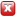
<style>
.page{position:relative;width:16px;height:16px}
.page>*{position:absolute;margin:0}
.t1{font:18px "Arial-Black";letter-spacing:0.05em;color:#ffffff;font-weight:bold}
</style>
<div class="page">
<p class="t1" style="left:3px;top:4px;width:9px;height:8px">X</p>
</div>
